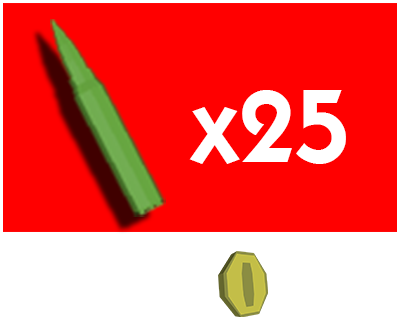
<style>
.page{position:relative;width:400px;height:330px;background:#ff0000}
.page>*{position:absolute;margin:0}
.t1{font:100px "ELEGANCE";color:#ffffff}
</style>
<div class="page">
<p class="t1" style="left:189px;top:90px;width:157px;height:74px">x25</p>
</div>
